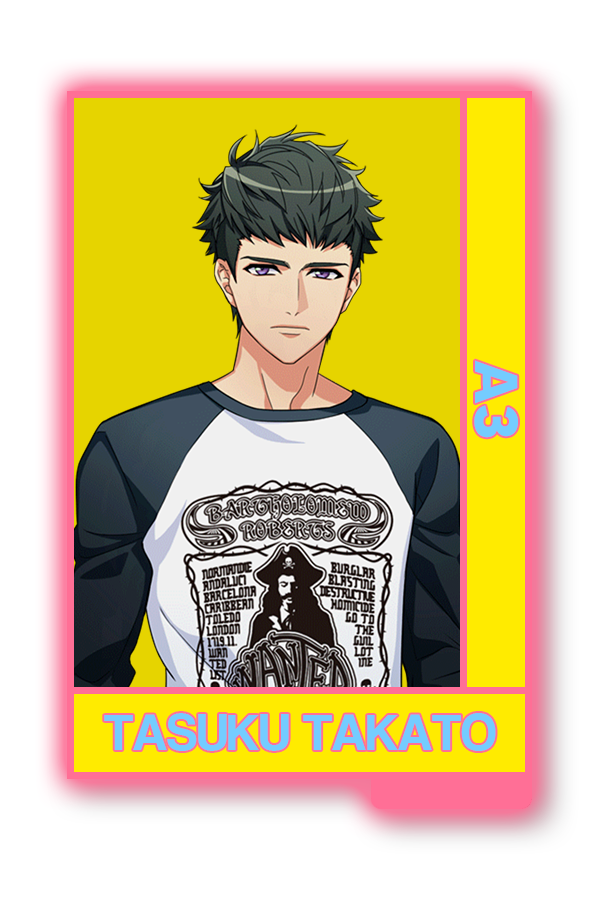
<style>
.page{position:relative;width:600px;height:900px;background:#ffffff}
.page>*{position:absolute;margin:0}
.t1{font:60.5px "MADETOMMY-Bold";color:#74ccff}
.t2{font:52.7px "CoolveticaRg-Regular";color:#74ccff}
</style>
<div class="page">
<p class="t1" style="left:474px;top:360px;width:44px;height:78px;rotate:90deg">A3</p>
<p class="t2" style="left:104px;top:713px;width:392px;height:38px">TASUKU TAKATO</p>
</div>
